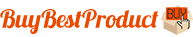
<style>
.page{position:relative;width:193px;height:37px;background:#ffffff}
.page>*{position:absolute;margin:0}
.t1{font:25px "Lobster1.3";color:#eb4800}
</style>
<div class="page">
<p class="t1" style="left:0px;top:9px;width:159px;height:25px">BuyBestProduct</p>
</div>
